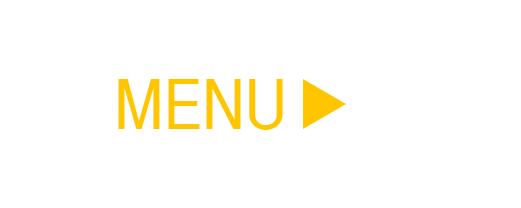
<style>
.page{position:relative;width:521px;height:208px;background:#ffffff}
.page>*{position:absolute;margin:0}
.t1{font:75px "InaiMathi";color:#ffc600}
</style>
<div class="page">
<p class="t1" style="left:118px;top:79px;width:165px;height:51px">MENU</p>
</div>
